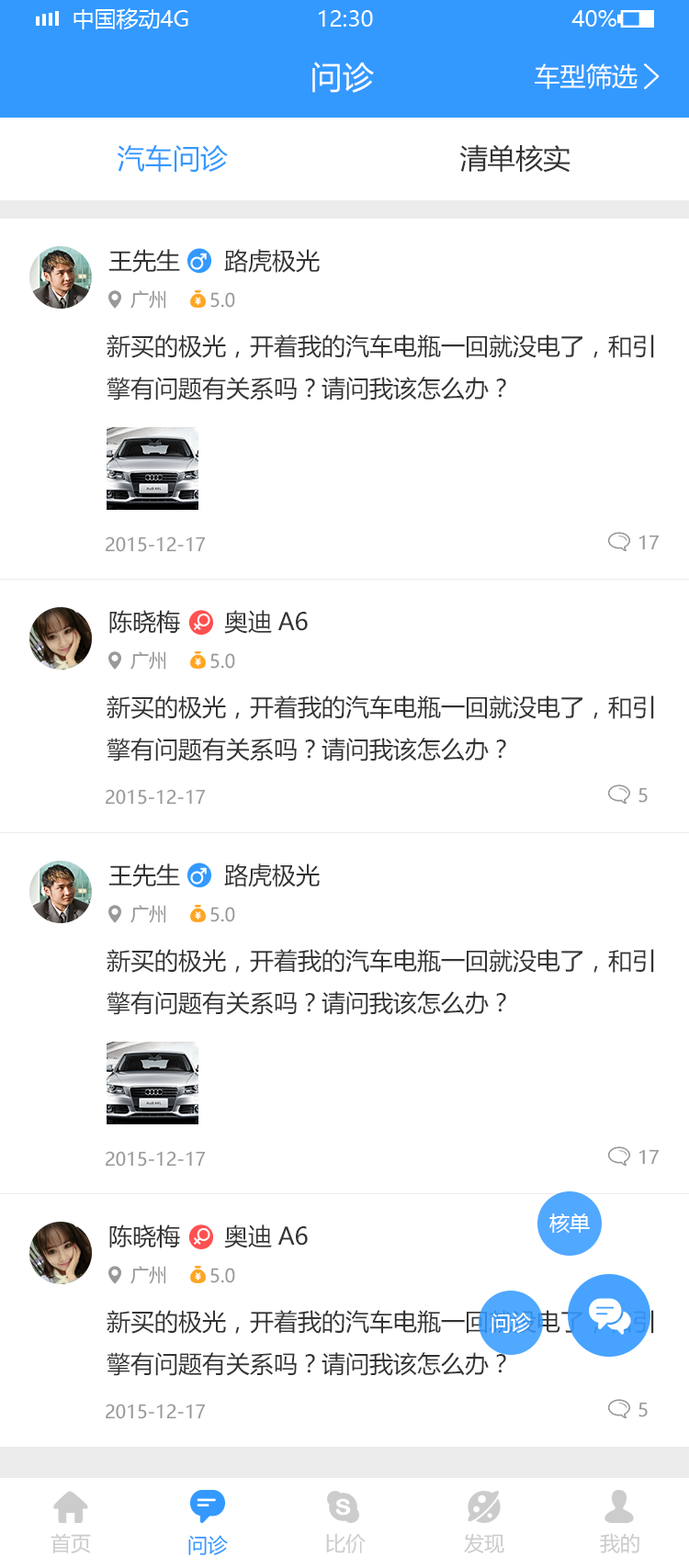
<style>
.page{position:relative;width:689px;height:1568px;background:#ffffff}
.page>*{position:absolute;margin:0}
.t1{font:31.2px "MicrosoftYaHei";color:#ffffff}
.t2{font:25.7px "MicrosoftYaHei";color:#ffffff}
.t3{font:27.6px "MicrosoftYaHei";color:#3399ff}
.t4{font:27.6px "MicrosoftYaHei";color:#333333}
.t5{font:23.9px "MicrosoftYaHei";color:#333333}
.t6{font:18.4px "MicrosoftYaHei";color:#999999}
.t7{font:20.2px "MicrosoftYaHei";color:#ffffff}
.t8{font:20.2px "MicrosoftYaHei";color:#cccccc}
.t9{font:20.2px "MicrosoftYaHei";color:#3399ff}
</style>
<div class="page">
<p class="t1" style="left:312px;top:62px;width:62px;height:31px">问诊</p>
<p class="t2" style="left:535px;top:63px;width:102px;height:26px">车型筛选</p>
<p class="t3" style="left:117px;top:144px;width:111px;height:28px">汽车问诊</p>
<p class="t4" style="left:459px;top:144px;width:111px;height:29px">清单核实</p>
<p class="t5" style="left:108px;top:249px;width:72px;height:24px">王先生</p>
<p class="t5" style="left:108px;top:249px;width:72px;height:24px">王先生</p>
<p class="t5" style="left:224px;top:249px;width:96px;height:24px">路虎极光</p>
<p class="t5" style="left:224px;top:249px;width:96px;height:24px">路虎极光</p>
<p class="t6" style="left:130px;top:290px;width:36px;height:19px">广州</p>
<p class="t6" style="left:130px;top:290px;width:36px;height:19px">广州</p>
<p class="t6" style="left:210px;top:292px;width:25px;height:16px">5.0</p>
<p class="t6" style="left:210px;top:292px;width:25px;height:16px">5.0</p>
<p class="t5" style="left:107px;top:334px;width:547px;height:66px">新买的极光，开着我的汽车电瓶一回就没电了，和引<br>擎有问题有关系吗？请问我该怎么办？</p>
<p class="t5" style="left:107px;top:334px;width:547px;height:66px">新买的极光，开着我的汽车电瓶一回就没电了，和引<br>擎有问题有关系吗？请问我该怎么办？</p>
<p class="t6" style="left:106px;top:536px;width:100px;height:16px">2015-12-17</p>
<p class="t6" style="left:106px;top:536px;width:100px;height:16px">2015-12-17</p>
<p class="t6" style="left:639px;top:535px;width:21px;height:15px">17</p>
<p class="t6" style="left:639px;top:535px;width:21px;height:15px">17</p>
<p class="t5" style="left:109px;top:610px;width:71px;height:24px">陈晓梅</p>
<p class="t5" style="left:224px;top:610px;width:84px;height:24px">奥迪A6</p>
<p class="t6" style="left:130px;top:651px;width:36px;height:19px">广州</p>
<p class="t6" style="left:210px;top:653px;width:25px;height:16px">5.0</p>
<p class="t5" style="left:107px;top:695px;width:547px;height:66px">新买的极光，开着我的汽车电瓶一回就没电了，和引<br>擎有问题有关系吗？请问我该怎么办？</p>
<p class="t6" style="left:106px;top:789px;width:100px;height:16px">2015-12-17</p>
<p class="t6" style="left:638px;top:787px;width:10px;height:16px">5</p>
<p class="t5" style="left:108px;top:863px;width:72px;height:24px">王先生</p>
<p class="t5" style="left:108px;top:863px;width:72px;height:24px">王先生</p>
<p class="t5" style="left:224px;top:863px;width:96px;height:24px">路虎极光</p>
<p class="t5" style="left:224px;top:863px;width:96px;height:24px">路虎极光</p>
<p class="t6" style="left:130px;top:905px;width:36px;height:18px">广州</p>
<p class="t6" style="left:130px;top:905px;width:36px;height:18px">广州</p>
<p class="t6" style="left:210px;top:907px;width:25px;height:15px">5.0</p>
<p class="t6" style="left:210px;top:907px;width:25px;height:15px">5.0</p>
<p class="t5" style="left:107px;top:949px;width:547px;height:66px">新买的极光，开着我的汽车电瓶一回就没电了，和引<br>擎有问题有关系吗？请问我该怎么办？</p>
<p class="t5" style="left:107px;top:949px;width:547px;height:66px">新买的极光，开着我的汽车电瓶一回就没电了，和引<br>擎有问题有关系吗？请问我该怎么办？</p>
<p class="t6" style="left:106px;top:1151px;width:100px;height:16px">2015-12-17</p>
<p class="t6" style="left:106px;top:1151px;width:100px;height:16px">2015-12-17</p>
<p class="t6" style="left:639px;top:1149px;width:21px;height:16px">17</p>
<p class="t6" style="left:639px;top:1149px;width:21px;height:16px">17</p>
<p class="t7" style="left:549px;top:1213px;width:41px;height:20px">核单</p>
<p class="t5" style="left:109px;top:1224px;width:71px;height:24px">陈晓梅</p>
<p class="t5" style="left:224px;top:1224px;width:84px;height:24px">奥迪A6</p>
<p class="t6" style="left:130px;top:1266px;width:36px;height:18px">广州</p>
<p class="t6" style="left:210px;top:1268px;width:25px;height:15px">5.0</p>
<p class="t5" style="left:107px;top:1310px;width:547px;height:66px">新买的极光，开着我的汽车电瓶一回就没电了，和引<br>擎有问题有关系吗？请问我该怎么办？</p>
<p class="t7" style="left:491px;top:1313px;width:40px;height:20px">问诊</p>
<p class="t6" style="left:106px;top:1404px;width:100px;height:15px">2015-12-17</p>
<p class="t6" style="left:638px;top:1402px;width:10px;height:15px">5</p>
<p class="t8" style="left:51px;top:1533px;width:40px;height:20px">首页</p>
<p class="t9" style="left:188px;top:1535px;width:40px;height:20px">问诊</p>
<p class="t8" style="left:326px;top:1533px;width:40px;height:20px">比价</p>
<p class="t8" style="left:464px;top:1533px;width:40px;height:20px">发现</p>
<p class="t8" style="left:600px;top:1533px;width:39px;height:20px">我的</p>
</div>
